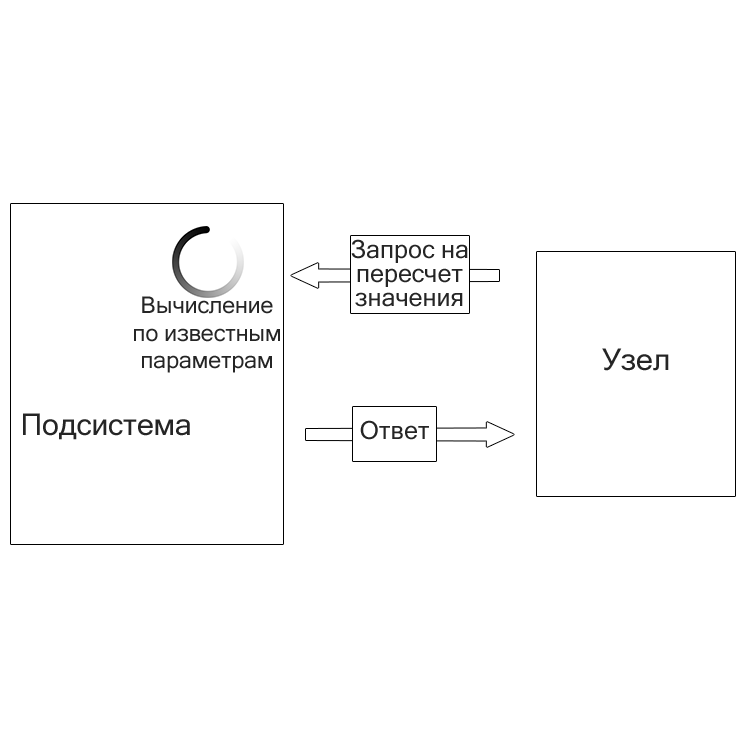
<style>
.page{position:relative;width:744px;height:744px;background:#ffffff}
.page>*{position:absolute;margin:0}
.t1{font:25px/24px "MicrosoftSansSerif";color:#252525}
.t2{font:23px "MicrosoftSansSerif";color:#252525}
.t3{font:30px "MicrosoftSansSerif";color:#252525}
.t4{font:25px "MicrosoftSansSerif";color:#252525}
</style>
<div class="page">
<p class="t1" style="left:351px;top:239px;width:117px;height:68px;text-align:center">Запрос на<br>пересчет<br>значения</p>
<p class="t2" style="left:134px;top:296px;width:146px;height:77px;text-align:center">Вычисление<br>по известным<br>параметрам</p>
<p class="t3" style="left:602px;top:348px;width:67px;height:23px">Узел</p>
<p class="t3" style="left:23px;top:413px;width:167px;height:27px">Подсистема</p>
<p class="t4" style="left:360px;top:420px;width:69px;height:20px">Ответ</p>
</div>
